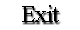
<style>
.page{position:relative;width:80px;height:30px;background:#ffffff}
.page>*{position:absolute;margin:0}
.t1{font:24px "TimesNewRomanPSMT";letter-spacing:-0.04em;color:#000000}
</style>
<div class="page">
<p class="t1" style="left:22px;top:5px;width:37px;height:17px">Exit</p>
</div>
